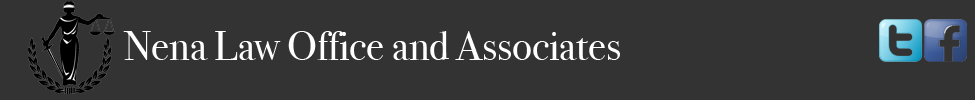
<style>
.page{position:relative;width:975px;height:100px;background:#333333}
.page>*{position:absolute;margin:0}
.t1{font:41.7px "BodoniSvtyTwoOSITCTT-Book";color:#ffffff}
</style>
<div class="page">
<p class="t1" style="left:123px;top:31px;width:497px;height:29px">Nena Law Office and Associates</p>
</div>
